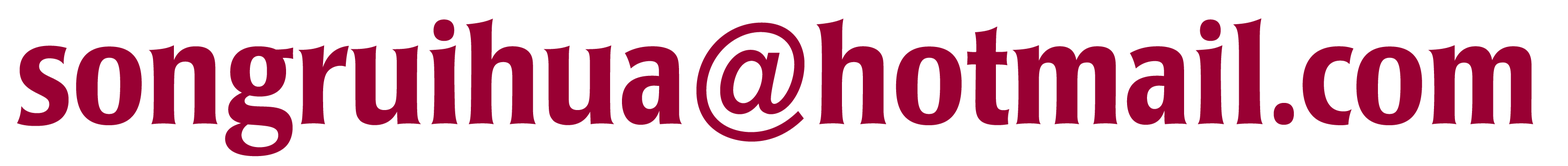
<style>
.page{position:relative;width:1568px;height:166px;background:#ffffff}
.page>*{position:absolute;margin:0}
.t1{font:142.5px "PopplLaudatio-MediumCondensed";color:#990033}
</style>
<div class="page">
<p class="t1" style="left:17px;top:18px;width:1516px;height:139px">songruihua@hotmail.com</p>
</div>
